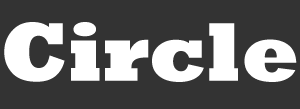
<style>
.page{position:relative;width:300px;height:109px;background:#333333}
.page>*{position:absolute;margin:0}
.t1{font:84.7px "Rockwell-ExtraBold";color:#ffffff}
</style>
<div class="page">
<p class="t1" style="left:4px;top:22px;width:293px;height:60px">Circle</p>
</div>
